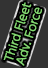
<style>
.page{position:relative;width:48px;height:68px;background:#333333}
.page>*{position:absolute;margin:0}
.t1{font:11px/12px "UDShinGoPro-Light";color:#84d972;font-weight:bold}
</style>
<div class="page">
<p class="t1" style="left:3px;top:2px;width:39px;height:64px;text-align:center;rotate:-72deg">Third Fleet<br>Adv. Force</p>
</div>
